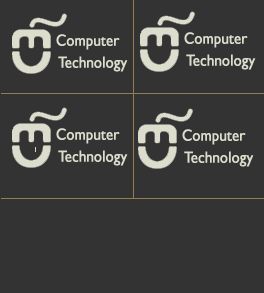
<style>
.page{position:relative;width:264px;height:293px;background:#333333}
.page>*{position:absolute;margin:0}
.t1{font:16.1px "GillSansMT";color:#dcddcd;font-weight:bold;scale:0.89 1}
</style>
<div class="page">
<p class="t1" style="left:56px;top:34px;width:64px;height:16px">Computer</p>
<p class="t1" style="left:184px;top:32px;width:64px;height:16px">Computer</p>
<p class="t1" style="left:186px;top:54px;width:70px;height:16px">Technology</p>
<p class="t1" style="left:58px;top:56px;width:70px;height:16px">Technology</p>
<p class="t1" style="left:56px;top:128px;width:64px;height:16px">Computer</p>
<p class="t1" style="left:182px;top:129px;width:64px;height:16px">Computer</p>
<p class="t1" style="left:58px;top:150px;width:70px;height:16px">Technology</p>
<p class="t1" style="left:184px;top:151px;width:70px;height:16px">Technology</p>
</div>
